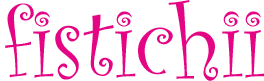
<style>
.page{position:relative;width:264px;height:81px;background:#ffffff}
.page>*{position:absolute;margin:0}
.t1{font:100px "CurlzMT";color:#e40584}
</style>
<div class="page">
<p class="t1" style="left:5px;top:0px;width:259px;height:81px">fistichii</p>
</div>
